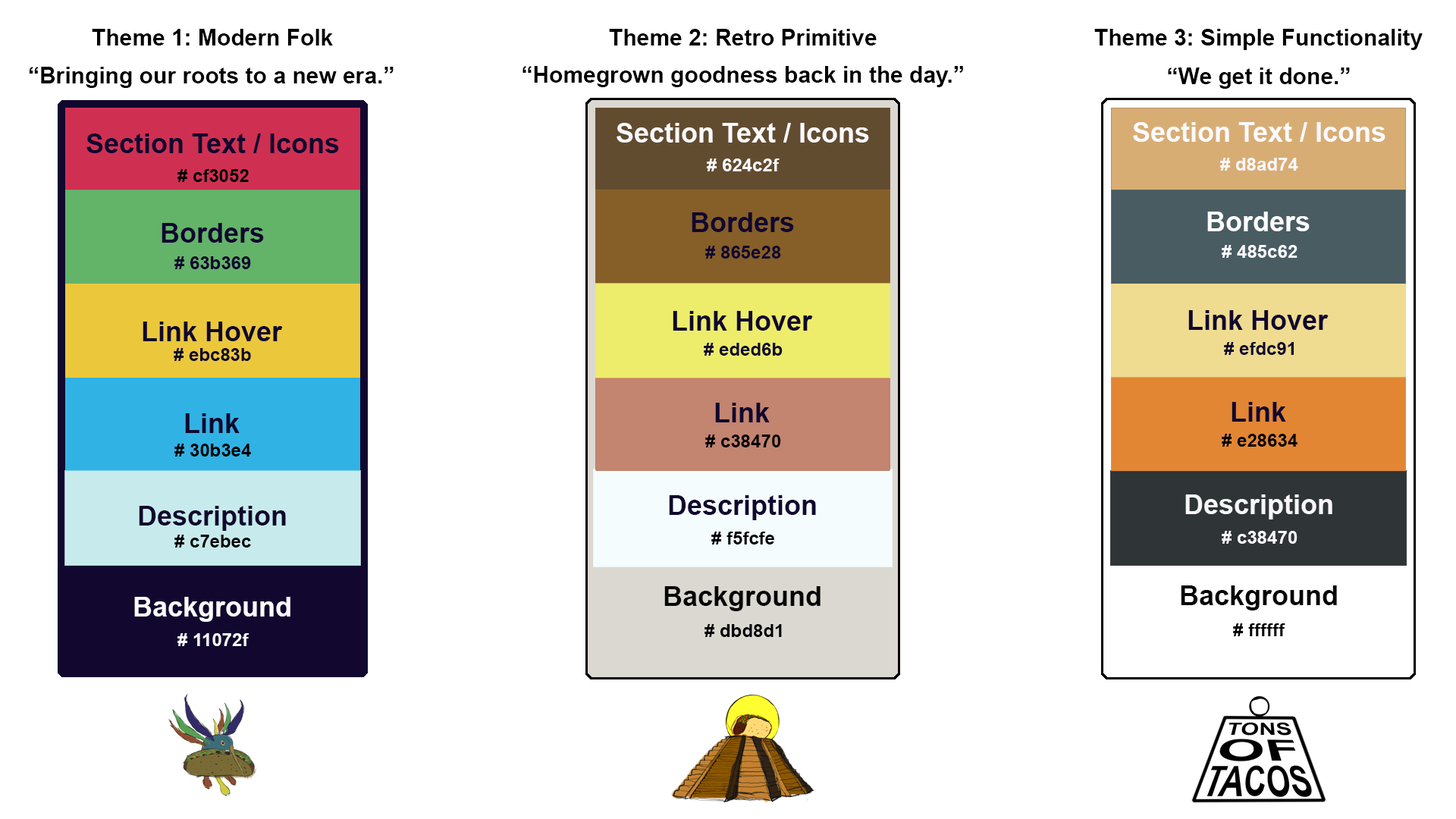
<style>
.page{position:relative;width:1456px;height:819px;background:#ffffff}
.page>*{position:absolute;margin:0}
.t1{font:22.7px "Arial-BoldMT";color:#000000}
.t2{font:27.3px "Arial-BoldMT";color:#fbfafe}
.t3{font:27.3px "Arial-BoldMT";color:#11072f}
.t4{font:18.2px "Arial-BoldMT";color:#f8f7fb}
.t5{font:18.2px "Arial-BoldMT";color:#010004}
.t6{font:27.3px "Arial-BoldMT";color:#fdfcff}
.t7{font:18.2px "Arial-BoldMT";color:#11072f}
.t8{font:18.2px "Arial-BoldMT";color:#f9f8fc}
.t9{font:27.3px "Arial-BoldMT";color:#f7f6f9}
.t10{font:18.2px "Arial-BoldMT";color:#f8f7fc}
.t11{font:27.3px "Arial-BoldMT";color:#060606}
.t12{font:27.3px "Arial-BoldMT";color:#faf9fc}
.t13{font:18.2px "Arial-BoldMT";color:#000000}
.t14{font:18.2px "Arial-BoldMT";color:#faf9fe}
</style>
<div class="page">
<p class="t1" style="left:92px;top:29px;width:241px;height:16px">Theme 1: Modern Folk</p>
<p class="t1" style="left:609px;top:29px;width:268px;height:16px">Theme 2: Retro Primitive</p>
<p class="t1" style="left:1094px;top:29px;width:329px;height:21px">Theme 3: Simple Functionality</p>
<p class="t1" style="left:522px;top:66px;width:441px;height:21px">“Homegrown goodness back in the day.”</p>
<p class="t1" style="left:29px;top:67px;width:365px;height:21px">“Bringing our roots to a new era.”</p>
<p class="t1" style="left:1168px;top:67px;width:182px;height:22px">“We get it done.”</p>
<p class="t2" style="left:617px;top:123px;width:252px;height:20px">Section Text / Icons</p>
<p class="t2" style="left:1133px;top:122px;width:252px;height:20px">Section Text / Icons</p>
<p class="t3" style="left:86px;top:133px;width:253px;height:20px">Section Text / Icons</p>
<p class="t4" style="left:707px;top:158px;width:73px;height:13px"># 624c2f</p>
<p class="t4" style="left:1220px;top:158px;width:78px;height:13px"># d8ad74</p>
<p class="t5" style="left:177px;top:169px;width:72px;height:13px"># cf3052</p>
<p class="t3" style="left:692px;top:212px;width:102px;height:20px">Borders</p>
<p class="t6" style="left:1207px;top:212px;width:103px;height:19px">Borders</p>
<p class="t3" style="left:162px;top:223px;width:102px;height:20px">Borders</p>
<p class="t7" style="left:705px;top:246px;width:76px;height:13px"># 865e28</p>
<p class="t8" style="left:1222px;top:245px;width:75px;height:13px"># 485c62</p>
<p class="t7" style="left:174px;top:256px;width:77px;height:13px"># 63b369</p>
<p class="t3" style="left:673px;top:311px;width:140px;height:20px">Link Hover</p>
<p class="t3" style="left:1188px;top:310px;width:141px;height:20px">Link Hover</p>
<p class="t3" style="left:143px;top:322px;width:140px;height:19px">Link Hover</p>
<p class="t7" style="left:174px;top:348px;width:77px;height:13px"># ebc83b</p>
<p class="t7" style="left:704px;top:343px;width:79px;height:13px"># eded6b</p>
<p class="t7" style="left:1224px;top:342px;width:70px;height:13px"># efdc91</p>
<p class="t3" style="left:1232px;top:402px;width:54px;height:20px">Link</p>
<p class="t3" style="left:185px;top:413px;width:55px;height:20px">Link</p>
<p class="t3" style="left:715px;top:403px;width:55px;height:19px">Link</p>
<p class="t5" style="left:705px;top:435px;width:76px;height:12px"># c38470</p>
<p class="t5" style="left:1222px;top:434px;width:75px;height:13px"># e28634</p>
<p class="t5" style="left:174px;top:444px;width:77px;height:13px"># 30b3e4</p>
<p class="t3" style="left:669px;top:495px;width:147px;height:25px">Description</p>
<p class="t9" style="left:1185px;top:494px;width:147px;height:25px">Description</p>
<p class="t3" style="left:139px;top:506px;width:147px;height:25px">Description</p>
<p class="t5" style="left:711px;top:532px;width:63px;height:12px"># f5fcfe</p>
<p class="t10" style="left:1222px;top:531px;width:75px;height:13px"># c38470</p>
<p class="t5" style="left:174px;top:535px;width:77px;height:13px"># c7ebec</p>
<p class="t11" style="left:664px;top:586px;width:157px;height:25px">Background</p>
<p class="t11" style="left:1181px;top:585px;width:156px;height:25px">Background</p>
<p class="t12" style="left:134px;top:597px;width:156px;height:25px">Background</p>
<p class="t13" style="left:704px;top:624px;width:78px;height:13px"># dbd8d1</p>
<p class="t13" style="left:1233px;top:623px;width:52px;height:13px"># ffffff</p>
<p class="t14" style="left:177px;top:633px;width:72px;height:13px"># 11072f</p>
</div>
